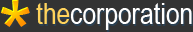
<style>
.page{position:relative;width:193px;height:32px;background:#333333}
.page>*{position:absolute;margin:0}
.t1{font:30px "ArialNarrow";color:#ffffff}
.t2{font:30px "ArialNarrow";color:#ffd35c}
</style>
<div class="page">
<p class="t1" style="left:36px;top:3px;width:156px;height:27px"><span class="t2">the</span>corporation</p>
</div>
